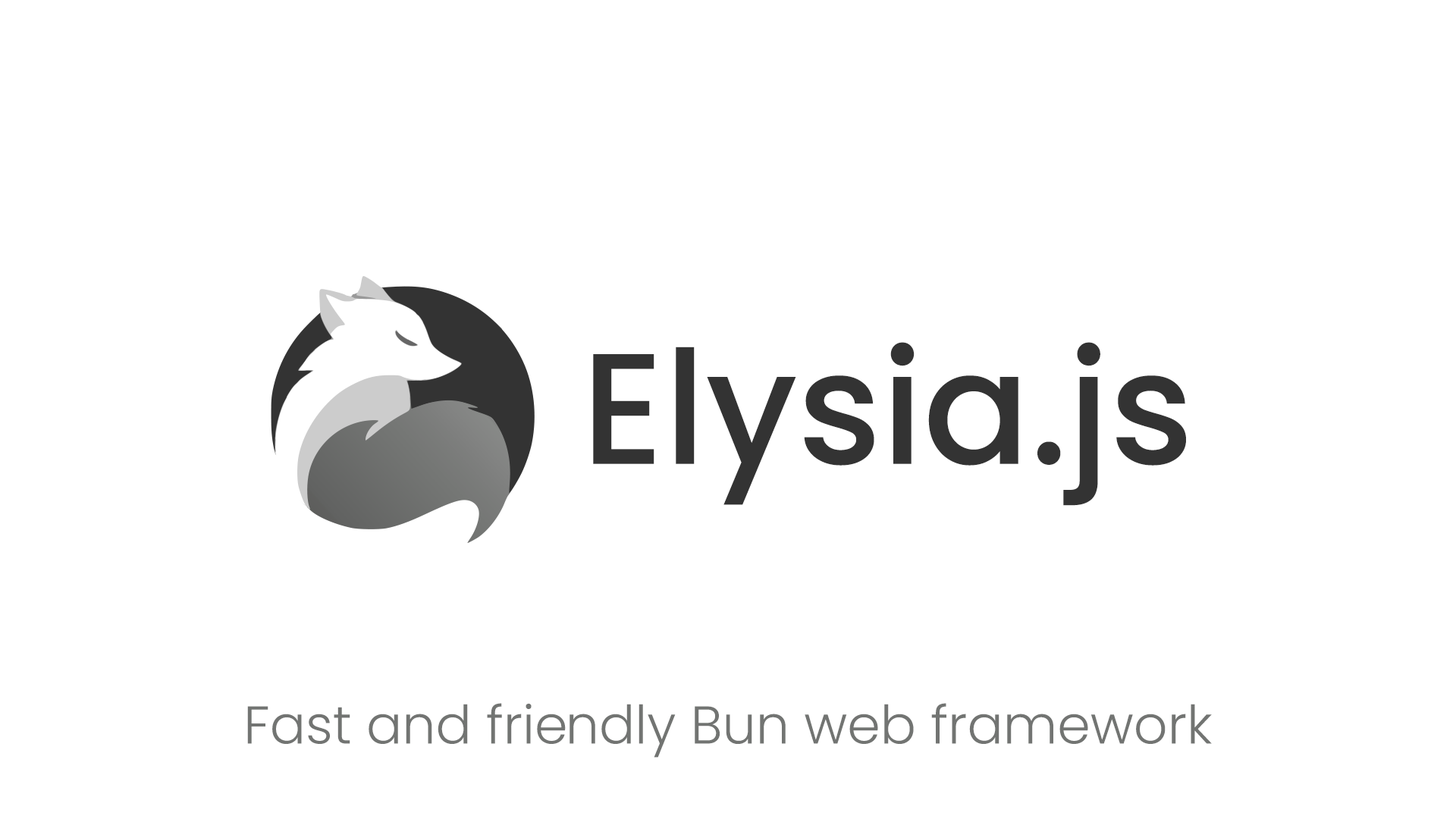
<style>
.page{position:relative;width:1456px;height:819px;background:#ffffff}
.page>*{position:absolute;margin:0}
.t1{font:157.5px "Poppins-Medium";color:#333333}
.t2{font:53.1px "Poppins-Light";color:#727472}
</style>
<div class="page">
<p class="t1" style="left:593px;top:342px;width:593px;height:164px">Elysia.js</p>
<p class="t2" style="left:247px;top:703px;width:965px;height:55px">Fast and friendly Bun web framework</p>
</div>
